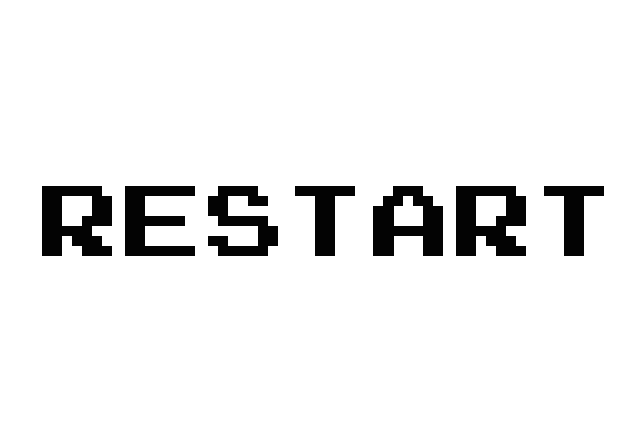
<style>
.page{position:relative;width:640px;height:427px;background:#ffffff}
.page>*{position:absolute;margin:0}
.t1{font:100px "JoystixMonospace-Regular";color:#000000}
</style>
<div class="page">
<p class="t1" style="left:42px;top:186px;width:562px;height:70px">RESTART</p>
</div>
